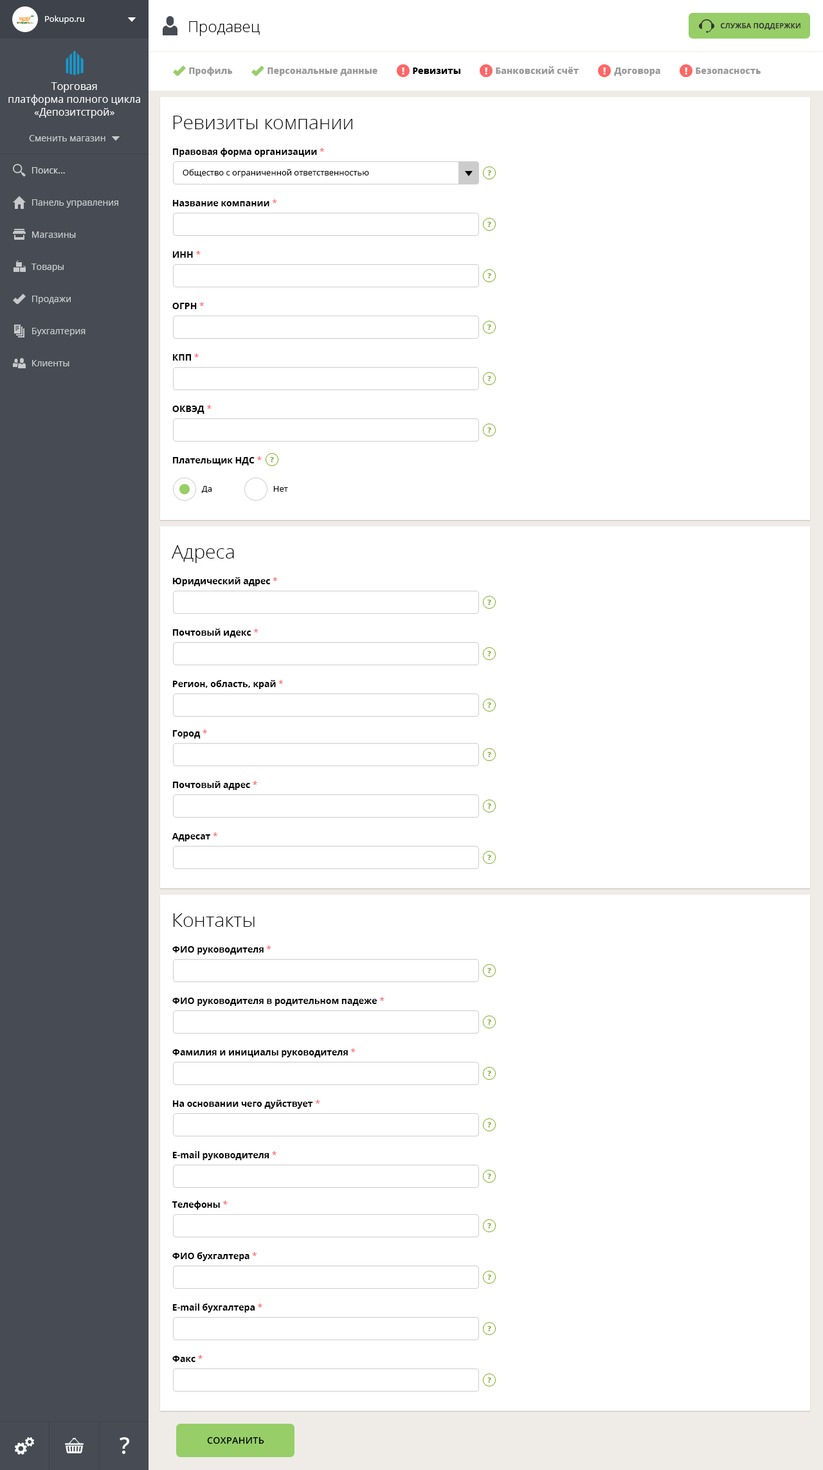
<style>
.page{position:relative;width:823px;height:1470px;background:#ffffff}
.page>*{position:absolute;margin:0}
.t1{font:8.4px "OpenSans";color:#ffffff}
.t2{font:15.4px "OpenSans-Light";color:#010101}
.t3{font:7.1px "OpenSans-Semibold";letter-spacing:0.025em;color:#333333;text-transform:uppercase}
.t4{font:9px "OpenSans-Extrabold";color:#999999}
.t5{font:9px "OpenSans-Extrabold";color:#000000}
.t6{font:10.3px/12.9px "OpenSans";color:#ffffff}
.t7{font:19.3px "OpenSans-Light";color:#000000}
.t8{font:9px "OpenSans";color:#c8c9cc}
.t9{font:9px "OpenSans-Bold";color:#000000}
.t10{font:9px "OpenSans";color:#fd5656}
.t11{font:9px "OpenSans";color:#d3d4d5}
.t12{font:8.4px "OpenSans";color:#000000}
.t13{font:7.1px "OpenSans-Extrabold";color:#7caa1f}
.t14{font:9px "OpenSans-Semibold";letter-spacing:0.025em;color:#000000;text-transform:uppercase}
</style>
<div class="page">
<p class="t1" style="left:45px;top:15px;width:39px;height:9px">Pokupo.ru</p>
<p class="t2" style="left:189px;top:21px;width:71px;height:15px">Продавец</p>
<p class="t3" style="left:721px;top:22px;width:79px;height:8px">Служба поддержки</p>
<p class="t4" style="left:189px;top:67px;width:44px;height:9px">Профиль</p>
<p class="t4" style="left:267px;top:68px;width:110px;height:8px">Персональные данные</p>
<p class="t5" style="left:413px;top:68px;width:47px;height:6px">Ревизиты</p>
<p class="t4" style="left:496px;top:66px;width:83px;height:8px">Банковский счёт</p>
<p class="t4" style="left:614px;top:68px;width:46px;height:8px">Договора</p>
<p class="t4" style="left:696px;top:68px;width:64px;height:6px">Безопасность</p>
<p class="t6" style="left:8px;top:82px;width:132px;height:36px;text-align:center">Торговая<br>платформа полного цикла<br>«Депозитстрой»</p>
<p class="t7" style="left:173px;top:116px;width:179px;height:13px">Ревизиты компании</p>
<p class="t8" style="left:29px;top:135px;width:76px;height:6px">Сменить магазин</p>
<p class="t9" style="left:172px;top:148px;width:153px;height:9px">Правовая форма организации <span class="t10">*</span></p>
<p class="t11" style="left:32px;top:167px;width:33px;height:7px">Поиск...</p>
<p class="t12" style="left:183px;top:169px;width:186px;height:8px">Общество с ограниченной ответственностью</p>
<p class="t13" style="left:487px;top:170px;width:4px;height:6px">?</p>
<p class="t8" style="left:32px;top:199px;width:86px;height:9px">Панель управления</p>
<p class="t9" style="left:172px;top:199px;width:105px;height:7px">Название компании <span class="t10">*</span></p>
<p class="t13" style="left:487px;top:222px;width:4px;height:5px">?</p>
<p class="t8" style="left:32px;top:231px;width:44px;height:7px">Магазины</p>
<p class="t9" style="left:172px;top:251px;width:29px;height:7px">ИНН <span class="t10">*</span></p>
<p class="t8" style="left:31px;top:264px;width:33px;height:8px">Товары</p>
<p class="t13" style="left:487px;top:273px;width:4px;height:5px">?</p>
<p class="t8" style="left:32px;top:296px;width:39px;height:8px">Продажи</p>
<p class="t9" style="left:172px;top:302px;width:32px;height:7px">ОГРН <span class="t10">*</span></p>
<p class="t8" style="left:32px;top:328px;width:54px;height:8px">Бухгалтерия</p>
<p class="t13" style="left:487px;top:325px;width:4px;height:5px">?</p>
<p class="t9" style="left:172px;top:354px;width:27px;height:7px">КПП <span class="t10">*</span></p>
<p class="t8" style="left:32px;top:360px;width:37px;height:6px">Клиенты</p>
<p class="t13" style="left:487px;top:376px;width:4px;height:5px">?</p>
<p class="t9" style="left:172px;top:405px;width:40px;height:9px">ОКВЭД <span class="t10">*</span></p>
<p class="t13" style="left:487px;top:428px;width:4px;height:5px">?</p>
<p class="t9" style="left:172px;top:456px;width:90px;height:9px">Плательщик НДС <span class="t10">*</span></p>
<p class="t13" style="left:270px;top:457px;width:4px;height:5px">?</p>
<p class="t12" style="left:201px;top:486px;width:11px;height:7px">Да</p>
<p class="t12" style="left:273px;top:486px;width:15px;height:6px">Нет</p>
<p class="t7" style="left:172px;top:545px;width:62px;height:18px">Адреса</p>
<p class="t9" style="left:172px;top:577px;width:106px;height:9px">Юридический адрес <span class="t10">*</span></p>
<p class="t13" style="left:487px;top:600px;width:4px;height:5px">?</p>
<p class="t9" style="left:172px;top:629px;width:86px;height:9px">Почтовый идекс <span class="t10">*</span></p>
<p class="t13" style="left:487px;top:651px;width:4px;height:5px">?</p>
<p class="t9" style="left:172px;top:680px;width:112px;height:9px">Регион, область, край <span class="t10">*</span></p>
<p class="t13" style="left:487px;top:703px;width:4px;height:5px">?</p>
<p class="t9" style="left:172px;top:730px;width:35px;height:9px">Город <span class="t10">*</span></p>
<p class="t13" style="left:487px;top:752px;width:4px;height:5px">?</p>
<p class="t9" style="left:172px;top:781px;width:85px;height:9px">Почтовый адрес <span class="t10">*</span></p>
<p class="t13" style="left:487px;top:804px;width:4px;height:5px">?</p>
<p class="t9" style="left:172px;top:833px;width:46px;height:9px">Адресат <span class="t10">*</span></p>
<p class="t13" style="left:487px;top:855px;width:4px;height:5px">?</p>
<p class="t7" style="left:173px;top:914px;width:82px;height:13px">Контакты</p>
<p class="t9" style="left:172px;top:946px;width:99px;height:9px">ФИО руководителя <span class="t10">*</span></p>
<p class="t13" style="left:487px;top:968px;width:4px;height:5px">?</p>
<p class="t9" style="left:172px;top:997px;width:212px;height:9px">ФИО руководителя в родительном падеже <span class="t10">*</span></p>
<p class="t13" style="left:487px;top:1020px;width:4px;height:5px">?</p>
<p class="t9" style="left:172px;top:1048px;width:184px;height:10px">Фамилия и инициалы руководителя <span class="t10">*</span></p>
<p class="t13" style="left:487px;top:1071px;width:4px;height:5px">?</p>
<p class="t9" style="left:172px;top:1100px;width:148px;height:9px">На основании чего дуйствует <span class="t10">*</span></p>
<p class="t13" style="left:487px;top:1122px;width:4px;height:6px">?</p>
<p class="t9" style="left:172px;top:1151px;width:104px;height:9px">E-mail руководителя <span class="t10">*</span></p>
<p class="t13" style="left:487px;top:1174px;width:4px;height:5px">?</p>
<p class="t9" style="left:172px;top:1201px;width:56px;height:9px">Телефоны <span class="t10">*</span></p>
<p class="t13" style="left:487px;top:1223px;width:4px;height:5px">?</p>
<p class="t9" style="left:172px;top:1252px;width:85px;height:9px">ФИО бухгалтера <span class="t10">*</span></p>
<p class="t13" style="left:487px;top:1275px;width:4px;height:5px">?</p>
<p class="t9" style="left:172px;top:1304px;width:90px;height:9px">E-mail бухгалтера <span class="t10">*</span></p>
<p class="t13" style="left:487px;top:1326px;width:4px;height:5px">?</p>
<p class="t9" style="left:172px;top:1355px;width:31px;height:7px">Факс <span class="t10">*</span></p>
<p class="t13" style="left:487px;top:1378px;width:4px;height:5px">?</p>
<p class="t14" style="left:207px;top:1437px;width:57px;height:7px">Сохранить</p>
</div>
